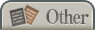
<style>
.page{position:relative;width:95px;height:30px;background:#c5c2b9}
.page>*{position:absolute;margin:0}
.t1{font:20px "RyuminPro-ExBold";letter-spacing:-0.08em;color:#6e6a64;scale:0.9 1}
</style>
<div class="page">
<p class="t1" style="left:46px;top:9px;width:43px;height:15px">Other</p>
</div>
